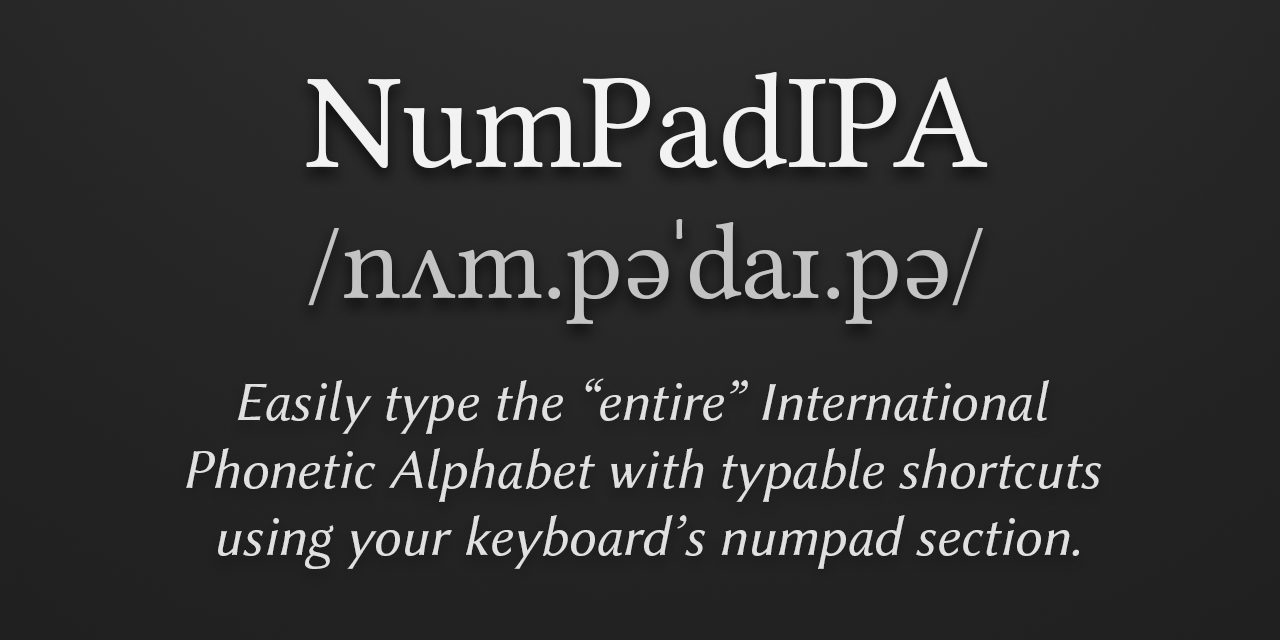
<style>
.page{position:relative;width:1280px;height:640px}
.page>*{position:absolute;margin:0}
.t1{font:109.3px "LibertinusSerif-Regular";color:#c3c3c3}
.t2{font:136.6px "LibertinusSerif-Regular";color:#f2f2f2}
.t3{font:56.2px "LibertinusSans-Italic";color:#e0e0e0}
</style>
<div class="page">
<p class="t1" style="left:306px;top:72px;width:682px;height:252px;text-align:center"><span class="t2">NumPadIPA<br></span>/nʌm.pəˈdaɪ.pə/</p>
<p class="t3" style="left:186px;top:378px;width:916px;height:191px;text-align:center">Easily type the “entire” International <br>Phonetic Alphabet with typable shortcuts <br>using your keyboard’s numpad section.</p>
</div>
